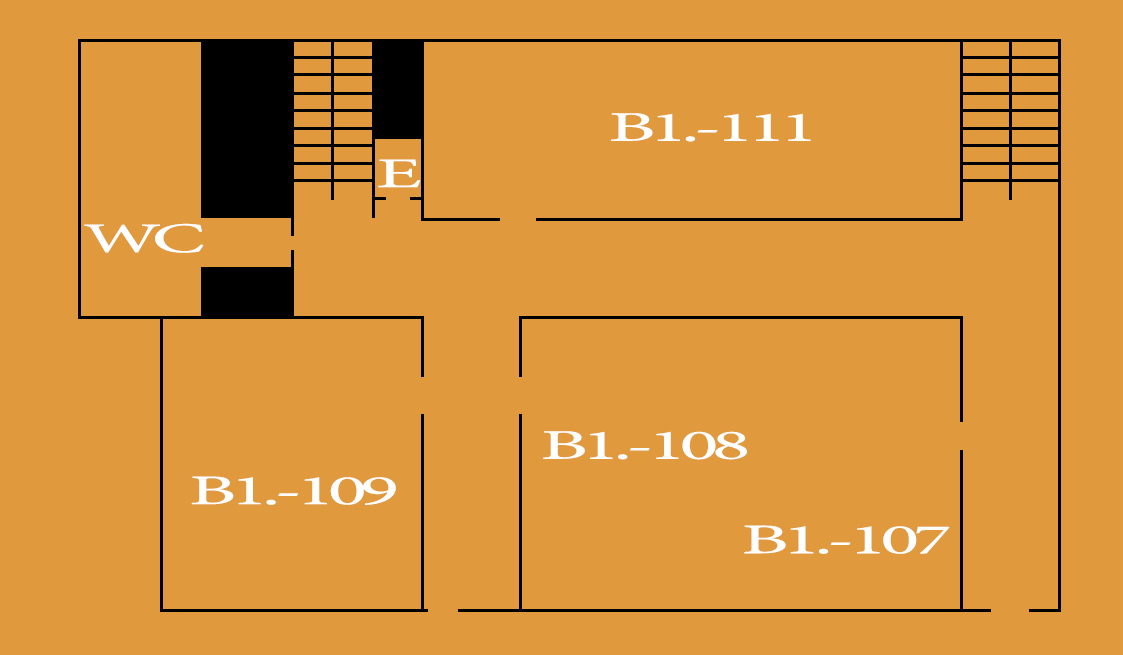
<style>
.page{position:relative;width:1123px;height:655px;background:#e0993d}
.page>*{position:absolute;margin:0}
.t1{font:42.3px "MinionPro-Regular";letter-spacing:-0.08em;color:#ffffff;scale:1.9 1}
</style>
<div class="page">
<p class="t1" style="left:611px;top:113px;width:200px;height:29px">B1.-111</p>
<p class="t1" style="left:378px;top:159px;width:43px;height:29px">E</p>
<p class="t1" style="left:84px;top:223px;width:120px;height:30px">WC</p>
<p class="t1" style="left:543px;top:431px;width:204px;height:29px">B1.-108</p>
<p class="t1" style="left:191px;top:476px;width:205px;height:29px">B1.-109</p>
<p class="t1" style="left:744px;top:525px;width:206px;height:29px">B1.-107</p>
</div>
